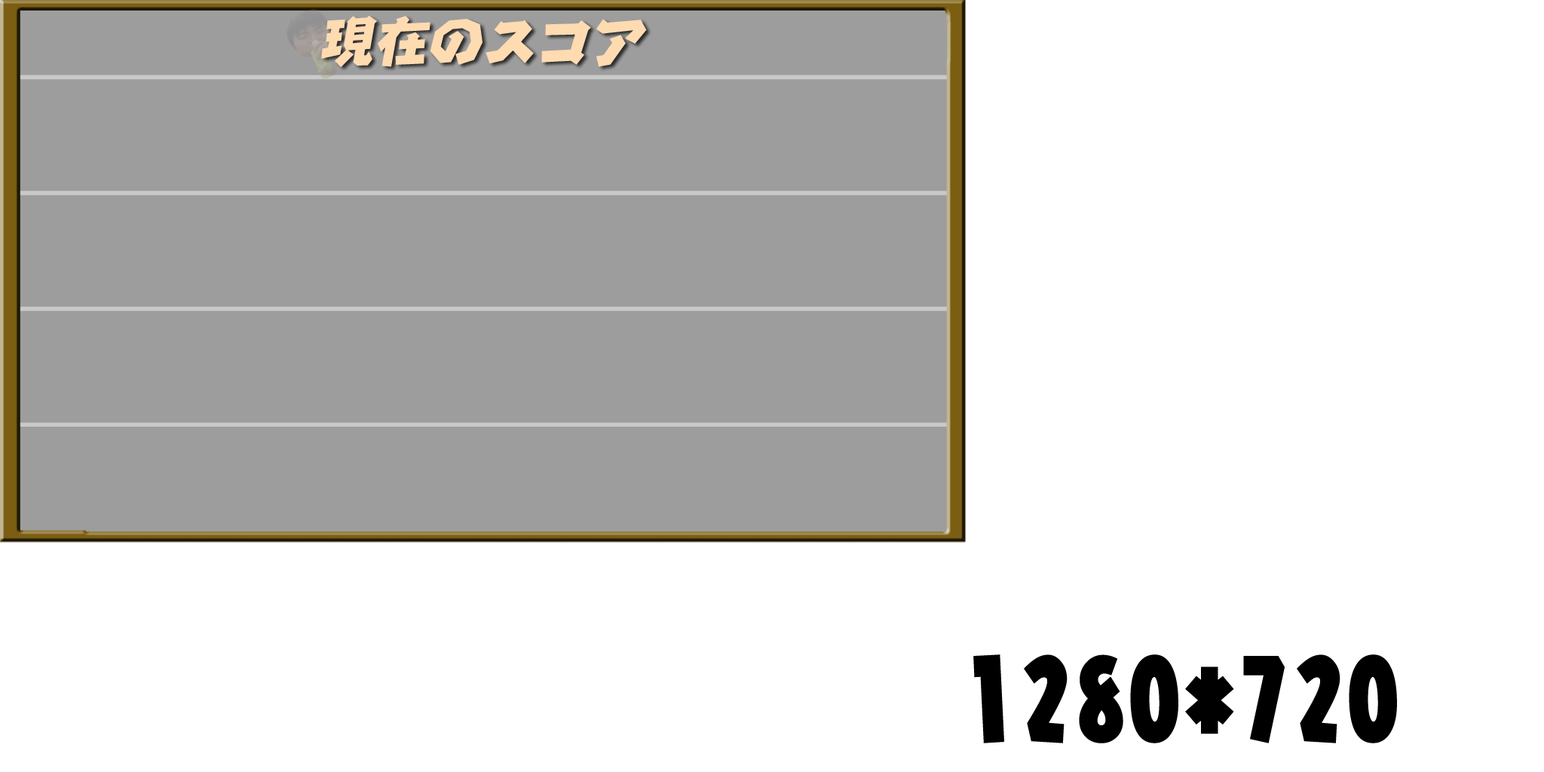
<style>
.page{position:relative;width:1544px;height:772px;background:#ffffff}
.page>*{position:absolute;margin:0}
.t1{font:54.1px "NIS-ZEDO-RKSJ-H";color:#ffdbb1;font-style:italic}
</style>
<div class="page">
<p class="t1" style="left:321px;top:15px;width:326px;height:52px">現在のスコア</p>
</div>
